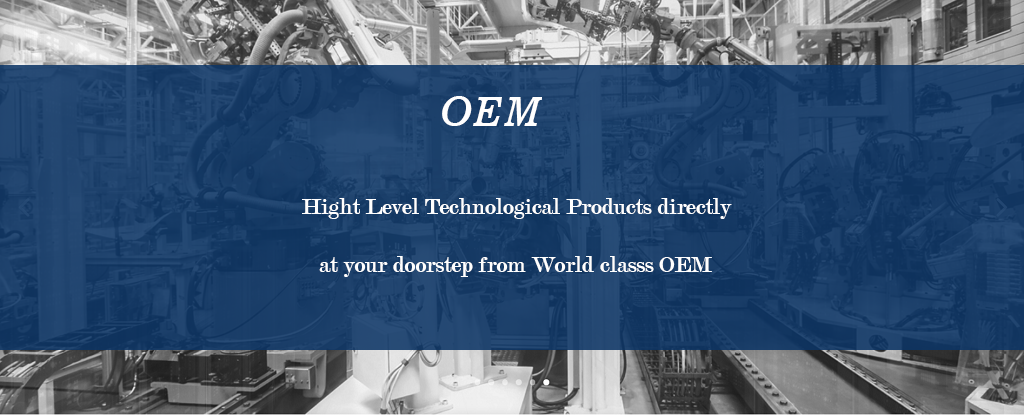
<style>
.page{position:relative;width:1024px;height:415px}
.page>*{position:absolute;margin:0}
.t1{font:40px "News701BT-ItalicA";color:#ffffff}
.t2{font:24px "Modern-Regular";color:#ffffff}
</style>
<div class="page">
<p class="t1" style="left:442px;top:96px;width:100px;height:30px">OEM</p>
<p class="t2" style="left:302px;top:198px;width:430px;height:79px">Hight Level Technological Products directly<br><br>   at your doorstep from World classs OEM</p>
</div>
